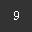
<style>
.page{position:relative;width:32px;height:32px;background:#333333}
.page>*{position:absolute;margin:0}
.t1{font:12px "CenturySchoolbook";letter-spacing:0.06em;color:#ffffff}
</style>
<div class="page">
<p class="t1" style="left:14px;top:11px;width:5px;height:9px">9</p>
</div>
